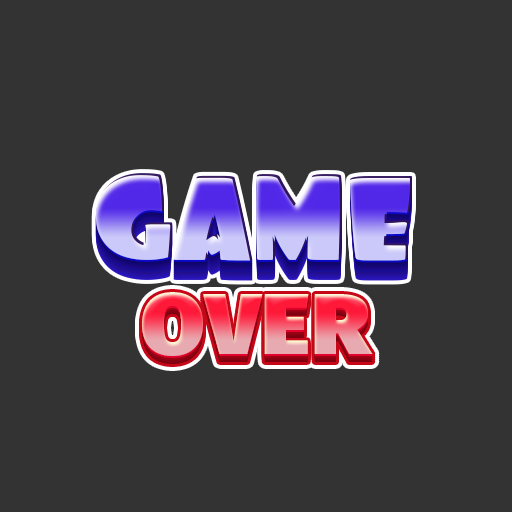
<style>
.page{position:relative;width:512px;height:512px;background:#333333}
.page>*{position:absolute;margin:0}
.t1{font:122.7px "Foo-Regular";letter-spacing:-0.02em;scale:1.05 1}
.t2{font:87.1px "FiraSans-Ultra";letter-spacing:0.025em;scale:1.05 1}
</style>
<div class="page">
<p class="t1" style="left:95px;top:173px;width:317px;height:88px">GAME</p>
<p class="t2" style="left:142px;top:292px;width:231px;height:64px">OVER</p>
</div>
